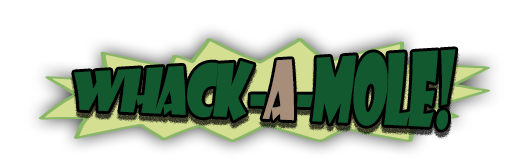
<style>
.page{position:relative;width:524px;height:168px;background:#ffffff}
.page>*{position:absolute;margin:0}
.t1{font:48px "ShowcardGothic-Reg";letter-spacing:-0.06em;color:#135930;text-transform:uppercase;font-style:italic;scale:1.07 1}
.t2{font:48px "ShowcardGothic-Reg";letter-spacing:-0.06em;color:#a68e7b;text-transform:uppercase;font-style:italic;scale:1.07 1}
</style>
<div class="page">
<p class="t1" style="left:74px;top:49px;width:382px;height:81px">Whack-<span class="t2">a</span>-mole!</p>
</div>
